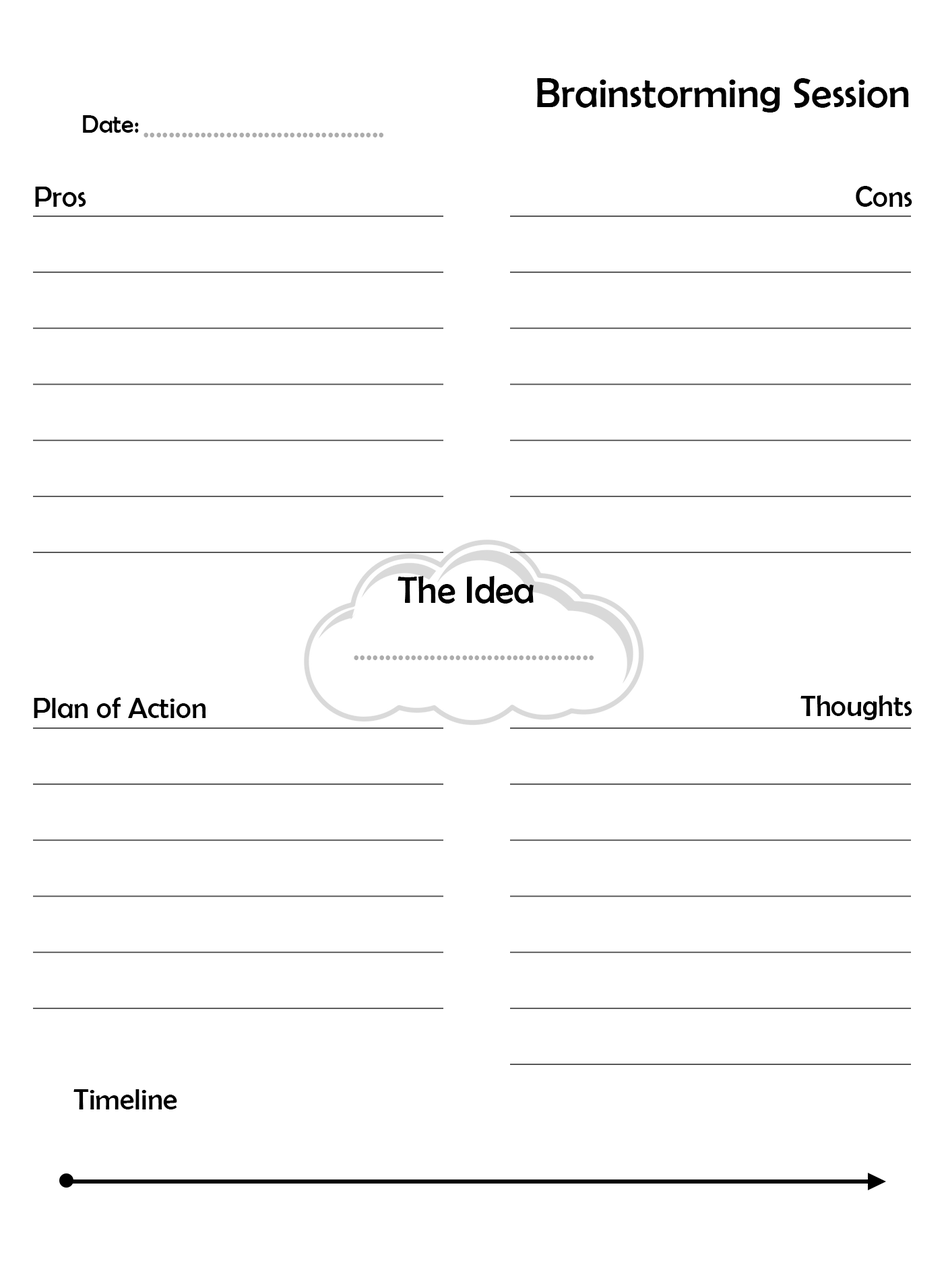
<style>
.page{position:relative;width:946px;height:1261px;background:#ffffff}
.page>*{position:absolute;margin:0}
.t1{font:42.3px "BerlinSansFB-Reg";color:#000000}
.t2{font:25.4px "BerlinSansFB-Reg";color:#000000}
.t3{font:29.6px "BerlinSansFB-Reg";color:#adadad}
.t4{font:29.6px "BerlinSansFB-Reg";color:#000000}
.t5{font:38.1px "BerlinSansFB-Reg";color:#000000}
</style>
<div class="page">
<p class="t1" style="left:537px;top:78px;width:372px;height:34px">Brainstorming Session</p>
<p class="t2" style="left:83px;top:115px;width:56px;height:18px">Date:</p>
<p class="t3" style="left:143px;top:133px;width:240px;height:4px">......................................</p>
<p class="t4" style="left:855px;top:186px;width:57px;height:21px">Cons</p>
<p class="t4" style="left:35px;top:187px;width:51px;height:20px">Pros</p>
<p class="t5" style="left:397px;top:576px;width:136px;height:28px">The Idea</p>
<p class="t3" style="left:354px;top:655px;width:239px;height:5px">......................................</p>
<p class="t4" style="left:34px;top:697px;width:172px;height:21px">Plan of Action</p>
<p class="t4" style="left:800px;top:695px;width:112px;height:25px">Thoughts</p>
<p class="t4" style="left:73px;top:1089px;width:104px;height:20px">Timeline</p>
</div>
